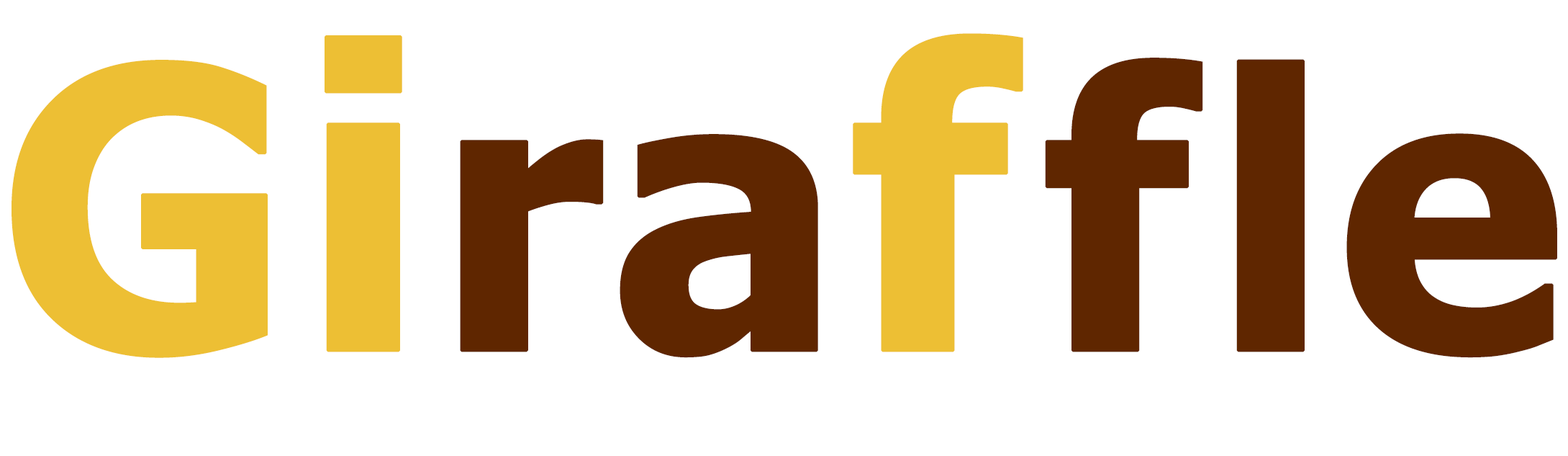
<style>
.page{position:relative;width:1568px;height:456px;background:#ffffff}
.page>*{position:absolute;margin:0}
.t1{font:380.8px "Tahoma-Bold";color:#5f2600;font-weight:bold}
.t2{font:389.8px "Tahoma-Bold";color:#edbf34;font-weight:bold}
.t3{font:412.3px "Tahoma-Bold";color:#edbf34;font-weight:bold}
</style>
<div class="page">
<p class="t1" style="left:12px;top:33px;width:1545px;height:325px"><span class="t2">G</span><span class="t3">i</span>ra<span class="t3">f </span>f le</p>
</div>
